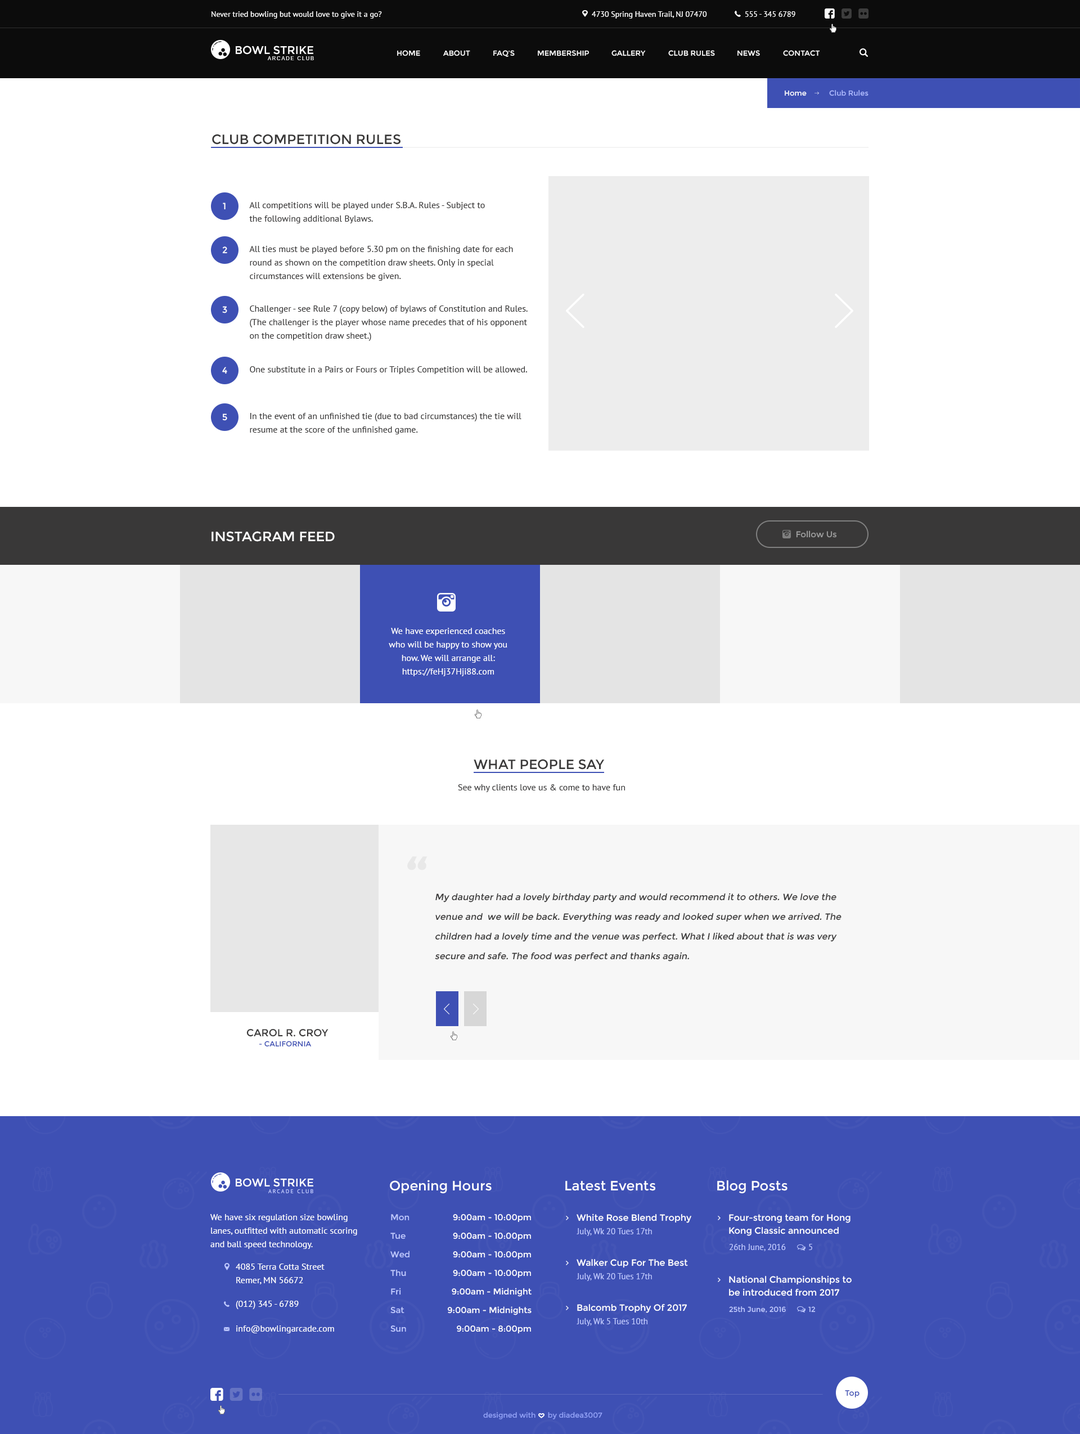
<style>
.page{position:relative;width:1080px;height:1434px;background:#ffffff}
.page>*{position:absolute;margin:0}
.t1{font:7.9px "PTSans-Regular";color:#ffffff}
.t2{font:11.2px "Montserrat-Regular";color:#ffffff;text-transform:uppercase}
.t3{font:7.3px "Montserrat-Regular";color:#ffffff;text-transform:uppercase}
.t4{font:5.1px "Arimo";letter-spacing:0.2em;color:#ffffff;text-transform:uppercase}
.t5{font:7.3px "Montserrat-Regular";color:#ffffff}
.t6{font:7.3px "Montserrat-Regular";color:#acb9ff}
.t7{font:13.5px "Montserrat-Regular";color:#393838;text-transform:uppercase}
.t8{font:9px "Montserrat-Regular";color:#ffffff}
.t9{font:9px/13.5px "PTSans-Regular";color:#393838}
.t10{font:9px "PTSans-Regular";color:#393838}
.t11{font:13.5px "Montserrat-Regular";color:#ffffff;text-transform:uppercase}
.t12{font:8.4px "Montserrat-Regular";color:#9d9d9d}
.t13{font:9px/13.5px "PTSans-Regular";color:#ffffff}
.t14{font:67.5px "Montserrat-Regular";color:#e8e8e8}
.t15{font:9px/19.7px "Montserrat-Regular";color:#393838;font-style:italic}
.t16{font:10.1px "Montserrat-Regular";color:#393838;text-transform:uppercase}
.t17{font:7.3px "Montserrat-Regular";color:#3e50b4;text-transform:uppercase}
.t18{font:13.5px "Montserrat-Regular";color:#ffffff}
.t19{font:5.6px "PTSans-Regular";letter-spacing:0.2em;color:#bfc9ff;text-transform:uppercase}
.t20{font:8.4px/18.6px "Montserrat-Regular";color:#bfc9ff}
.t21{font:8.4px/18.6px "Montserrat-Regular";color:#ffffff}
.t22{font:9px/12.9px "Montserrat-Regular";color:#ffffff}
.t23{font:8.4px "PTSans-Regular";color:#bfc9ff}
.t24{font:8.4px "PTSans-Regular";color:#bfc9ff;text-transform:uppercase}
.t25{font:9px "PTSans-Regular";color:#ffffff}
.t26{font:7.3px "Montserrat-Regular";color:#bfc9ff}
.t27{font:7.3px "Montserrat-Regular";color:#bfc9ff;text-transform:uppercase}
.t28{font:7.9px "Montserrat-Regular";color:#3e50b4}
.t29{font:7.3px "Montserrat-Regular";color:#91a1f7}
</style>
<div class="page">
<p class="t1" style="left:212px;top:11px;width:170px;height:8px">Never tried bowling but would love to give it a go?</p>
<p class="t1" style="left:592px;top:11px;width:115px;height:8px">4730 Spring Haven Trail, NJ 07470</p>
<p class="t1" style="left:745px;top:11px;width:50px;height:6px">555 - 345 6789</p>
<p class="t2" style="left:236px;top:46px;width:77px;height:9px">Bowl Strike</p>
<p class="t3" style="left:397px;top:50px;width:23px;height:6px">Home</p>
<p class="t3" style="left:443px;top:50px;width:27px;height:6px">About</p>
<p class="t3" style="left:493px;top:50px;width:22px;height:7px">FAQ’s</p>
<p class="t3" style="left:538px;top:50px;width:51px;height:6px">membership</p>
<p class="t3" style="left:611px;top:50px;width:35px;height:6px">Gallery</p>
<p class="t3" style="left:668px;top:50px;width:47px;height:6px">club rules</p>
<p class="t3" style="left:737px;top:50px;width:23px;height:6px">News</p>
<p class="t3" style="left:783px;top:50px;width:37px;height:6px">contact</p>
<p class="t4" style="left:268px;top:56px;width:46px;height:4px">arcade Club</p>
<p class="t5" style="left:785px;top:91px;width:22px;height:5px">Home</p>
<p class="t6" style="left:829px;top:90px;width:39px;height:6px">Club Rules</p>
<p class="t7" style="left:212px;top:134px;width:188px;height:11px">Club Competition Rules</p>
<p class="t8" style="left:223px;top:202px;width:3px;height:8px">1</p>
<p class="t9" style="left:249px;top:202px;width:236px;height:21px">All competitions will be played under S.B.A. Rules - Subject to <br>the following additional Bylaws.</p>
<p class="t9" style="left:249px;top:246px;width:264px;height:35px">All ties must be played before 5.30 pm on the finishing date for each round as shown on the competition draw sheets. Only in special <br>circumstances will extensions be given.</p>
<p class="t8" style="left:222px;top:246px;width:5px;height:8px">2</p>
<p class="t9" style="left:250px;top:305px;width:278px;height:36px">Challenger - see Rule 7 (copy below) of bylaws of Constitution and Rules. (The challenger is the player whose name precedes that of his opponent on the competition draw sheet.)</p>
<p class="t8" style="left:222px;top:306px;width:5px;height:7px">3</p>
<p class="t8" style="left:222px;top:367px;width:5px;height:7px">4</p>
<p class="t10" style="left:250px;top:366px;width:277px;height:8px">One substitute in a Pairs or Fours or Triples Competition will be allowed.</p>
<p class="t8" style="left:222px;top:413px;width:5px;height:8px">5</p>
<p class="t9" style="left:250px;top:413px;width:271px;height:21px">In the event of an unfinished tie (due to bad circumstances) the tie will resume at the score of the unfinished game.</p>
<p class="t11" style="left:212px;top:531px;width:123px;height:11px">Instagram feed</p>
<p class="t12" style="left:796px;top:530px;width:40px;height:8px">Follow Us</p>
<p class="t13" style="left:389px;top:628px;width:118px;height:48px;text-align:center">We have experienced coaches <br>who will be happy to show you how. We will arrange all: https://feHj37Hji88.com</p>
<p class="t7" style="left:474px;top:759px;width:131px;height:11px">What People Say</p>
<p class="t10" style="left:458px;top:784px;width:167px;height:8px">See why clients love us &amp; come to have fun</p>
<p class="t14" style="left:407px;top:856px;width:21px;height:14px">“</p>
<p class="t15" style="left:435px;top:893px;width:407px;height:68px">My daughter had a lovely birthday party and would recommend it to others. We love the <br>venue and  we will be back. Everything was ready and looked super when we arrived. The children had a lovely time and the venue was perfect. What I liked about that is was very secure and safe. The food was perfect and thanks again.</p>
<p class="t16" style="left:246px;top:1029px;width:82px;height:8px">Carol R. Croy</p>
<p class="t17" style="left:259px;top:1041px;width:53px;height:6px">- California</p>
<p class="t2" style="left:236px;top:1178px;width:77px;height:9px">Bowl strike</p>
<p class="t18" style="left:390px;top:1180px;width:102px;height:14px">Opening Hours</p>
<p class="t18" style="left:565px;top:1181px;width:90px;height:10px">Latest Events</p>
<p class="t18" style="left:717px;top:1180px;width:71px;height:14px">Blog Posts</p>
<p class="t19" style="left:268px;top:1189px;width:45px;height:4px">arcade Club</p>
<p class="t13" style="left:210px;top:1214px;width:147px;height:35px">We have six regulation size bowling lanes, outfitted with automatic scoring and ball speed technology.</p>
<p class="t20" style="left:390px;top:1214px;width:20px;height:118px">Mon<br>Tue<br>Wed<br>Thu<br>Fri<br>Sat<br>Sun</p>
<p class="t21" style="left:447px;top:1214px;width:85px;height:120px;text-align:right">9:00am - 10:00pm<br>9:00am - 10:00pm<br>9:00am - 10:00pm<br>9:00am - 10:00pm<br>9:00am - Midnight<br>9:00am - Midnights<br>9:00am - 8:00pm</p>
<p class="t8" style="left:577px;top:1213px;width:114px;height:10px">White Rose Blend Trophy</p>
<p class="t22" style="left:729px;top:1213px;width:121px;height:23px">Four-strong team for Hong Kong Classic announced</p>
<p class="t23" style="left:577px;top:1228px;width:75px;height:8px">July, Wk 20 Tues 17th</p>
<p class="t23" style="left:729px;top:1244px;width:57px;height:7px">26th June, 2016</p>
<p class="t24" style="left:809px;top:1244px;width:3px;height:6px">5</p>
<p class="t13" style="left:236px;top:1263px;width:89px;height:21px">4085 Terra Cotta Street<br>Remer, MN 56672</p>
<p class="t8" style="left:577px;top:1259px;width:111px;height:9px">Walker Cup For The Best</p>
<p class="t23" style="left:577px;top:1273px;width:75px;height:8px">July, Wk 20 Tues 17th</p>
<p class="t22" style="left:729px;top:1275px;width:123px;height:21px">National Championships to be introduced from 2017</p>
<p class="t25" style="left:236px;top:1300px;width:63px;height:9px">(012) 345 - 6789</p>
<p class="t8" style="left:577px;top:1303px;width:110px;height:10px">Balcomb Trophy Of 2017</p>
<p class="t26" style="left:729px;top:1306px;width:57px;height:7px">25th June, 2016</p>
<p class="t27" style="left:808px;top:1306px;width:8px;height:6px">12</p>
<p class="t25" style="left:236px;top:1325px;width:98px;height:8px">info@bowlingarcade.com</p>
<p class="t23" style="left:577px;top:1318px;width:70px;height:8px">July, Wk 5 Tues 10th</p>
<p class="t28" style="left:845px;top:1390px;width:15px;height:7px">Top</p>
<p class="t29" style="left:483px;top:1412px;width:119px;height:7px">designed with      by diadea3007</p>
</div>
